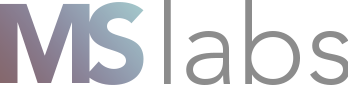
<style>
.page{position:relative;width:348px;height:85px;background:#ffffff}
.page>*{position:absolute;margin:0}
.t1{font:111.8px "AvenirLTStd-Black";letter-spacing:-0.12em}
.t2{font:111.8px "AvenirLTStd-Light";color:#8c8c8c}
.t3{font:111.8px "EdwardianScriptITC";letter-spacing:-0.02em;color:#856565}
</style>
<div class="page">
<p class="t1" style="left:0px;top:2px;width:144px;height:83px">MS</p>
<p class="t2" style="left:164px;top:0px;width:186px;height:85px"><span class="t3"> </span>labs</p>
</div>
